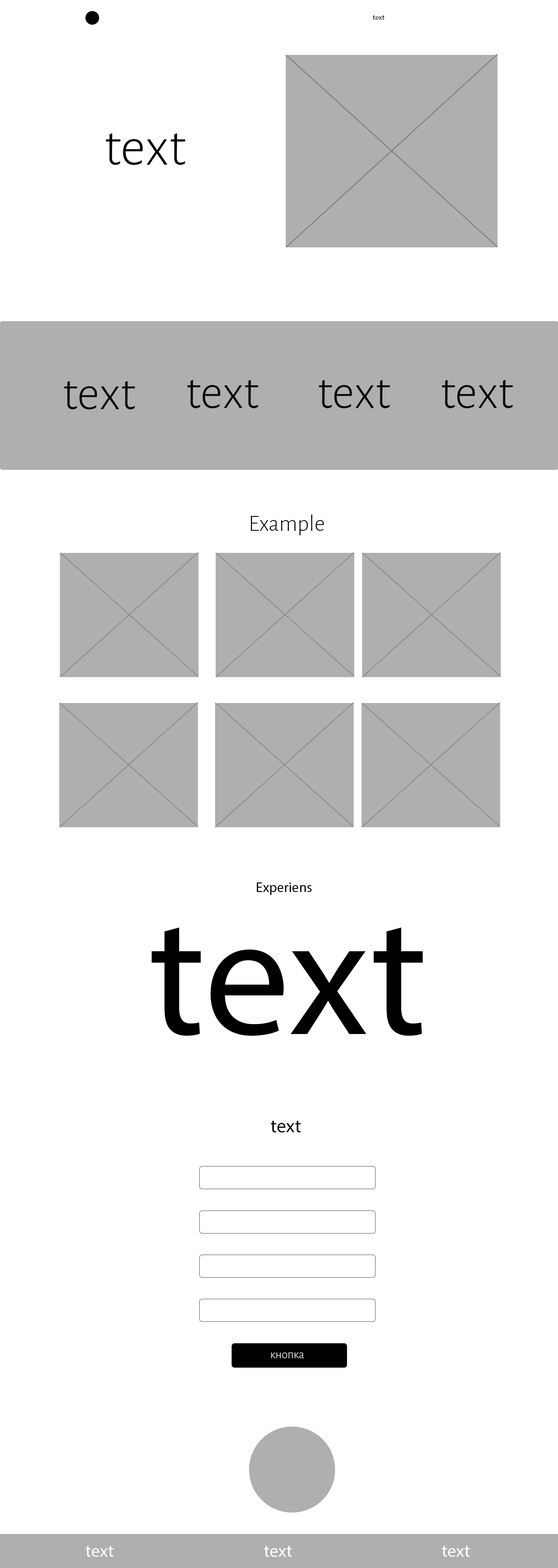
<style>
.page{position:relative;width:558px;height:1568px;background:#ffffff}
.page>*{position:absolute;margin:0}
.t1{font:7.3px "MyriadPro-Regular";color:#000000}
.t2{font:49.5px "AlegreyaSans-Light";color:#080808}
.t3{font:23.2px "AlegreyaSans-Light";color:#080808}
.t4{font:13.9px "MyriadPro-Regular";color:#000000}
.t5{font:170.8px "MyriadPro-Regular";color:#000000}
.t6{font:18.6px "MyriadPro-Regular";color:#000000}
.t7{font:17.4px "MyriadPro-Regular";color:#ffffff}
</style>
<div class="page">
<p class="t1" style="left:373px;top:15px;width:11px;height:5px">text</p>
<p class="t2" style="left:64px;top:381px;width:71px;height:28px">text</p>
<p class="t2" style="left:187px;top:380px;width:71px;height:28px">text</p>
<p class="t2" style="left:319px;top:380px;width:71px;height:28px">text</p>
<p class="t2" style="left:441px;top:380px;width:72px;height:28px">text</p>
<p class="t3" style="left:251px;top:515px;width:73px;height:20px">Example</p>
<p class="t4" style="left:256px;top:882px;width:55px;height:13px">Experiens</p>
<p class="t5" style="left:151px;top:927px;width:271px;height:109px">text</p>
<p class="t6" style="left:271px;top:1121px;width:30px;height:11px">text</p>
<p class="t7" style="left:86px;top:1546px;width:28px;height:11px">text</p>
<p class="t7" style="left:264px;top:1546px;width:28px;height:11px">text</p>
<p class="t7" style="left:442px;top:1546px;width:28px;height:11px">text</p>
</div>
